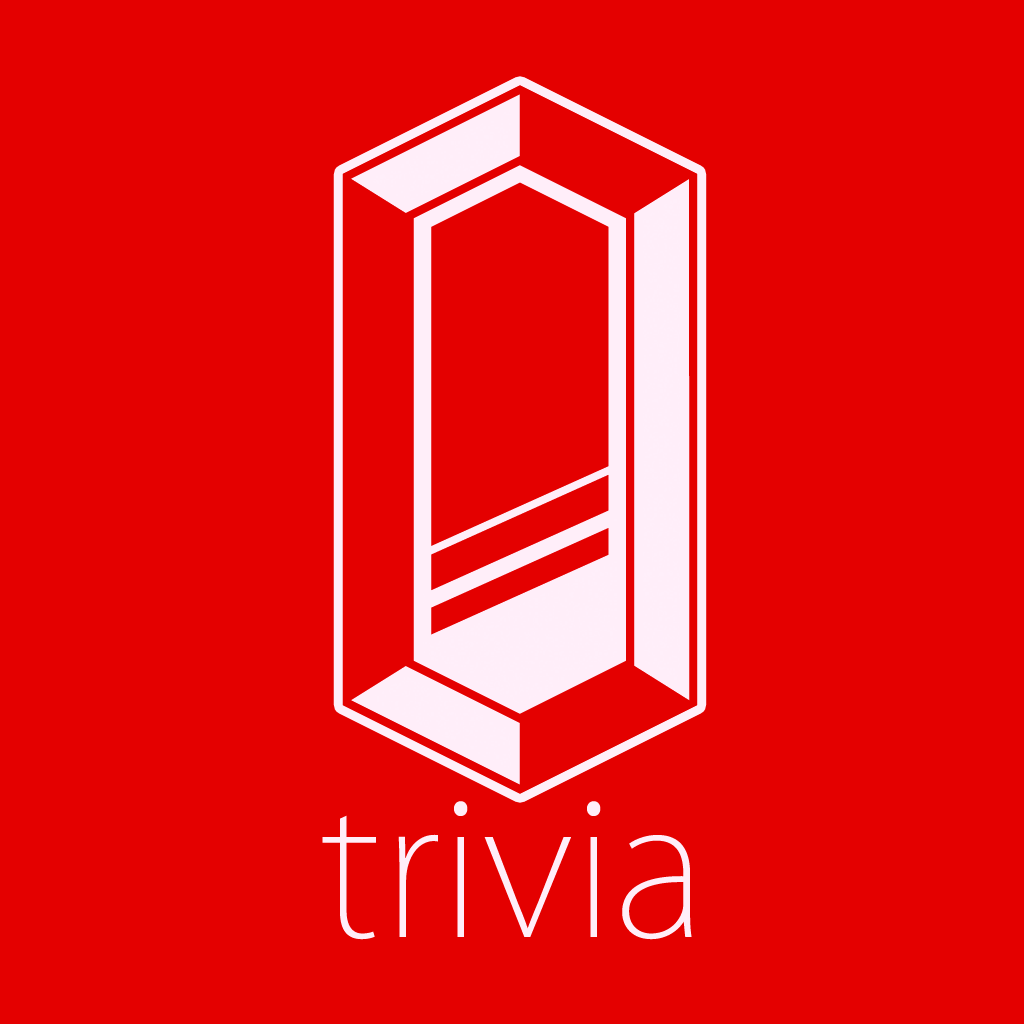
<style>
.page{position:relative;width:1024px;height:1024px;background:#e40000}
.page>*{position:absolute;margin:0}
.t1{font:185.9px "KozGoPro-ExtraLight";color:#ffeef9}
</style>
<div class="page">
<p class="t1" style="left:322px;top:801px;width:370px;height:139px">trivia</p>
</div>
